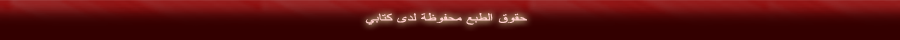
<style>
.page{position:relative;width:900px;height:40px;background:#330000}
.page>*{position:absolute;margin:0}
.t1{font:11.4px "ArabicTransparent";color:#ffcccc;scale:1.39 1}
</style>
<div class="page">
<p class="t1" style="left:365px;top:12px;width:162px;height:13px">حقوق الطبع محفوظة لدى كتابي</p>
</div>
